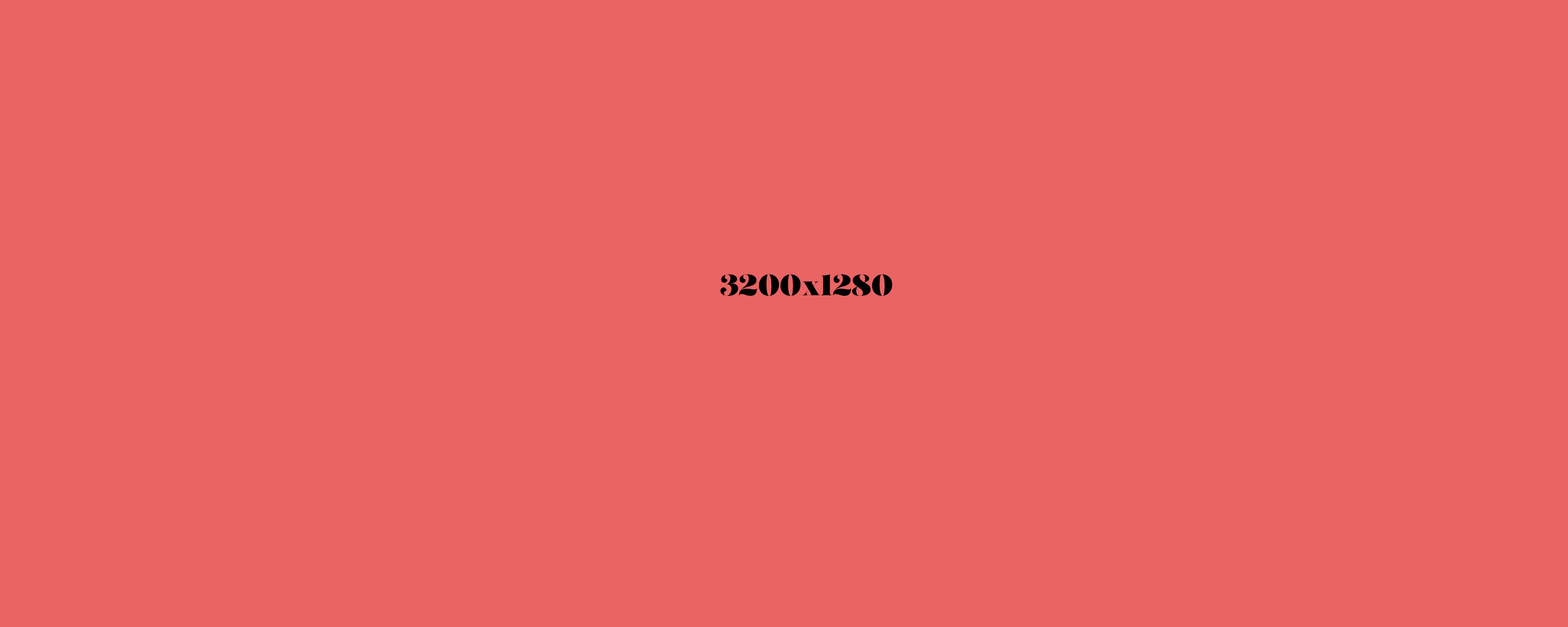
<style>
.page{position:relative;width:1568px;height:627px;background:#ea6464}
.page>*{position:absolute;margin:0}
.t1{font:29.4px "Salome-Fine";color:#000000}
</style>
<div class="page">
<p class="t1" style="left:720px;top:274px;width:172px;height:22px">3200x1280</p>
</div>
